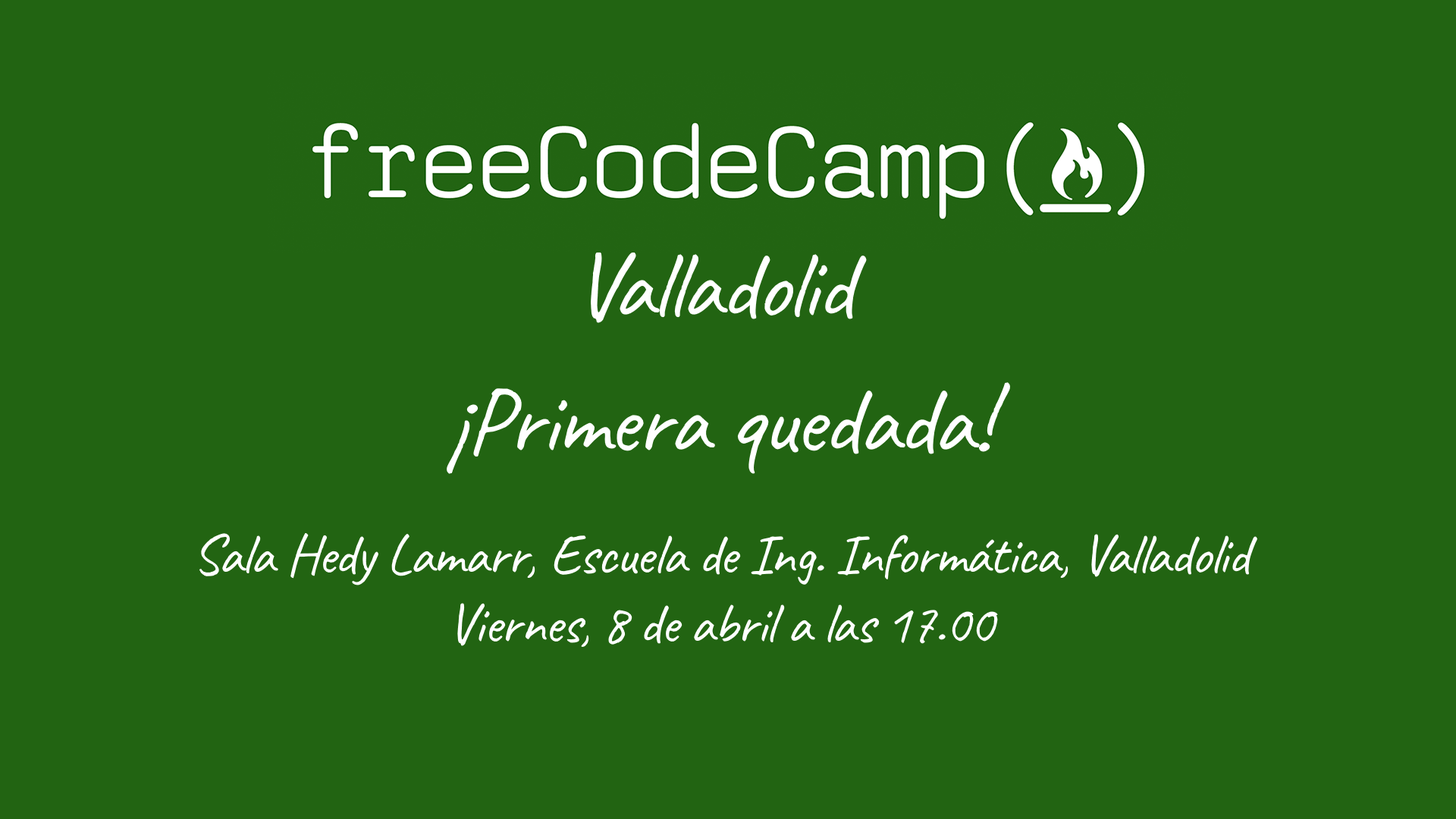
<style>
.page{position:relative;width:1456px;height:819px;background:#226412}
.page>*{position:absolute;margin:0}
.t1{font:95.9px "Caveat-Regular";letter-spacing:-0.025em;color:#ffffff}
.t2{font:57.5px "Caveat-Regular";letter-spacing:-0.025em;color:#ffffff}
</style>
<div class="page">
<p class="t1" style="left:591px;top:252px;width:276px;height:71px">Valladolid</p>
<p class="t1" style="left:447px;top:382px;width:563px;height:92px">¡Primera quedada!</p>
<p class="t2" style="left:199px;top:533px;width:1058px;height:114px;text-align:center">Sala Hedy Lamarr, Escuela de Ing. Informática, Valladolid<br>Viernes, 8 de abril a las 17.00</p>
</div>
